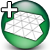
<style>
.page{position:relative;width:50px;height:50px;background:#ffffff}
.page>*{position:absolute;margin:0}
.t1{font:30px "LatinWide";color:#fefefe}
</style>
<div class="page">
<p class="t1" style="left:1px;top:2px;width:17px;height:16px">+</p>
</div>
